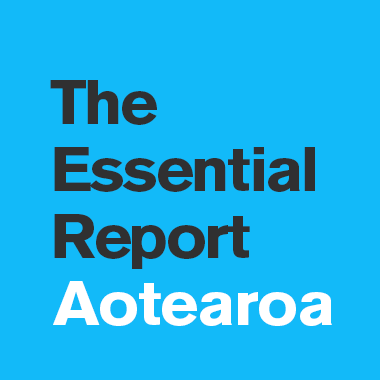
<style>
.page{position:relative;width:380px;height:380px;background:#12baf9}
.page>*{position:absolute;margin:0}
.t1{font:62.2px/61.7px "AkzidenzGroteskBE-Bold";letter-spacing:-0.04em;color:#303031;scale:1.06 1}
.t2{font:62.2px/61.7px "AkzidenzGroteskBE-Bold";letter-spacing:-0.06em;color:#303031;scale:1.06 1}
.t3{font:62.2px/61.7px "AkzidenzGroteskBE-Bold";letter-spacing:-0.02em;color:#303031;scale:1.06 1}
.t4{font:62.2px "AkzidenzGroteskBE-Bold";letter-spacing:-0.02em;color:#ffffff;scale:1.06 1}
</style>
<div class="page">
<p class="t1" style="left:50px;top:80px;width:265px;height:189px"><span class="t2">T</span>he<br>E<span class="t3">ss</span><span class="t2">e</span>n<span class="t3">t</span><span class="t2">i</span>al<br>R<span class="t2">e</span>po<span class="t3">r</span>t</p>
<p class="t4" style="left:53px;top:281px;width:279px;height:45px">Aotearoa</p>
</div>
